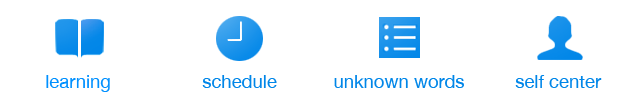
<style>
.page{position:relative;width:640px;height:98px;background:#ffffff}
.page>*{position:absolute;margin:0}
.t1{font:18.5px "HelveticaNeue";color:#0090ff}
.t2{font:18.5px "HelveticaNeue";color:#0086e8}
</style>
<div class="page">
<p class="t1" style="left:46px;top:75px;width:64px;height:17px">learning</p>
<p class="t2" style="left:202px;top:75px;width:75px;height:13px">schedule</p>
<p class="t2" style="left:334px;top:75px;width:130px;height:13px">unknown words</p>
<p class="t2" style="left:515px;top:75px;width:87px;height:13px">self center</p>
</div>
